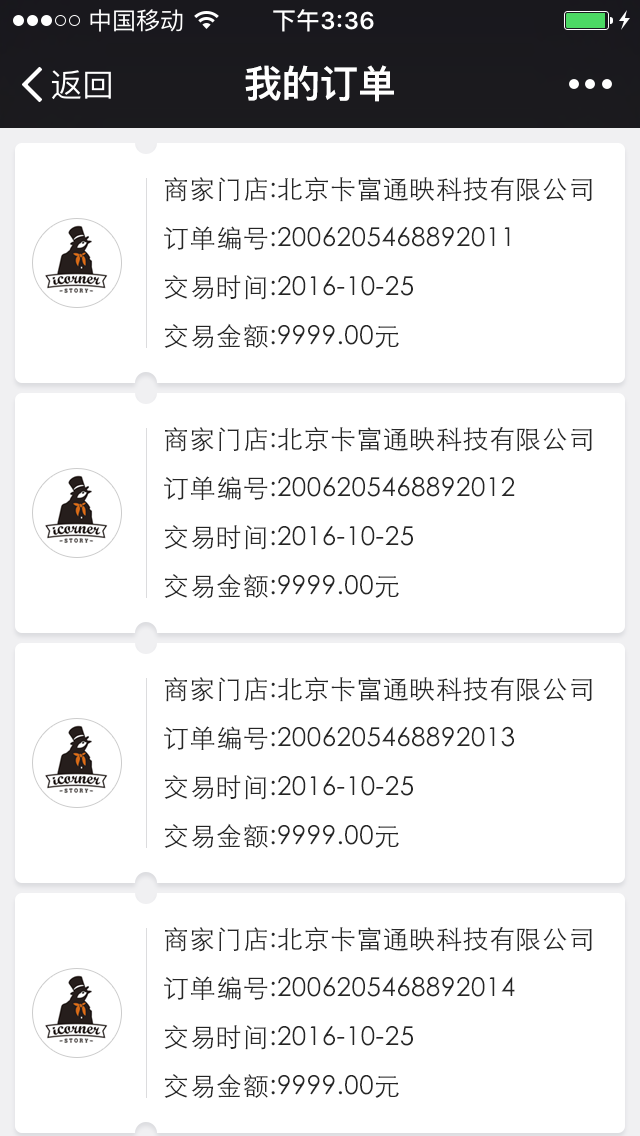
<style>
.page{position:relative;width:640px;height:1136px;background:#ffffff}
.page>*{position:absolute;margin:0}
.t1{font:38px "PingFangSC-Semibold";color:#ffffff}
.t2{font:26px/49px "STHeitiSC-Light";letter-spacing:0.02em;color:#262626}
</style>
<div class="page">
<p class="t1" style="left:245px;top:65px;width:149px;height:37px">我的订单</p>
<p class="t2" style="left:164px;top:176px;width:428px;height:173px">商家门店:北京卡富通映科技有限公司<br>订单编号:2006205468892011<br>交易时间:2016-10-25<br>交易金额:9999.00元</p>
<p class="t2" style="left:164px;top:426px;width:428px;height:173px">商家门店:北京卡富通映科技有限公司<br>订单编号:2006205468892012<br>交易时间:2016-10-25<br>交易金额:9999.00元</p>
<p class="t2" style="left:164px;top:676px;width:428px;height:173px">商家门店:北京卡富通映科技有限公司<br>订单编号:2006205468892013<br>交易时间:2016-10-25<br>交易金额:9999.00元</p>
<p class="t2" style="left:164px;top:926px;width:428px;height:173px">商家门店:北京卡富通映科技有限公司<br>订单编号:2006205468892014<br>交易时间:2016-10-25<br>交易金额:9999.00元</p>
</div>
